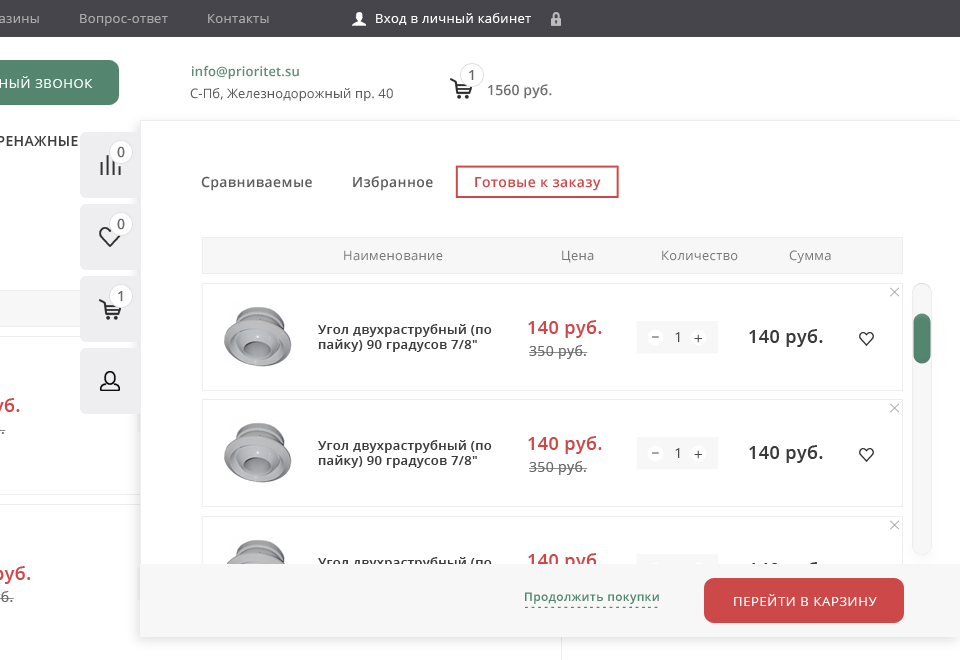
<style>
.page{position:relative;width:960px;height:660px;background:#ffffff}
.page>*{position:absolute;margin:0}
.t1{font:14px "OpenSans-Semibold";letter-spacing:0.025em;color:#676767;text-transform:uppercase}
.t2{font:14px "OpenSans-Semibold";letter-spacing:0.025em;color:#5c5c5c}
.t3{font:14px "OpenSans-Semibold";letter-spacing:0.025em;color:#cd4949}
.t4{font:13px "OpenSans";letter-spacing:0.025em;color:#787878}
.t5{font:13px "OpenSans-Semibold";letter-spacing:0.025em;color:#3a3a3a}
.t6{font:18px "OpenSans-Semibold";letter-spacing:0.025em;color:#cd4949}
.t7{font:18px "OpenSans-Semibold";letter-spacing:0.025em;color:#3a3a3a}
.t8{font:16px "SegoeUI"}
.t9{font:14px "SegoeUI";color:#4a4a4a}
.t10{font:16px "SegoeUI";color:#4a4a4a}
.t11{font:14px "OpenSans";letter-spacing:0.025em;color:#696969}
.t12{font:12px "OpenSans-Semibold";letter-spacing:0.025em;color:#54856f}
.t13{font:13px "OpenSans";letter-spacing:0.05em;color:#ffffff;text-transform:uppercase}
</style>
<div class="page">
<p class="t1" style="left:117px;top:146px;width:8px;height:12px">0</p>
<p class="t2" style="left:201px;top:176px;width:111px;height:15px">Сравниваемые</p>
<p class="t2" style="left:353px;top:176px;width:80px;height:15px">Избранное</p>
<p class="t3" style="left:475px;top:177px;width:126px;height:14px">Готовые к заказу</p>
<p class="t1" style="left:117px;top:218px;width:8px;height:12px">0</p>
<p class="t4" style="left:344px;top:250px;width:99px;height:11px">Наименование</p>
<p class="t4" style="left:562px;top:250px;width:32px;height:13px">Цена</p>
<p class="t4" style="left:662px;top:250px;width:76px;height:11px">Количество</p>
<p class="t4" style="left:789px;top:250px;width:42px;height:13px">Сумма</p>
<p class="t1" style="left:118px;top:291px;width:5px;height:10px">1</p>
<p class="t5" style="left:318px;top:324px;width:174px;height:28px">Угол двухраструбный (по пайку) 90 градусов 7/8"</p>
<p class="t6" style="left:528px;top:320px;width:74px;height:18px">140 руб.</p>
<p class="t7" style="left:749px;top:329px;width:74px;height:18px">140 руб.</p>
<p class="t8" style="left:652px;top:336px;width:7px;height:2px">_</p>
<p class="t9" style="left:675px;top:332px;width:5px;height:10px">1</p>
<p class="t10" style="left:694px;top:334px;width:8px;height:9px">+</p>
<p class="t11" style="left:529px;top:345px;width:59px;height:14px">350 руб.</p>
<p class="t6" style="left:528px;top:436px;width:74px;height:18px">140 руб.</p>
<p class="t5" style="left:318px;top:440px;width:174px;height:28px">Угол двухраструбный (по пайку) 90 градусов 7/8"</p>
<p class="t9" style="left:675px;top:448px;width:5px;height:10px">1</p>
<p class="t7" style="left:749px;top:445px;width:74px;height:18px">140 руб.</p>
<p class="t11" style="left:529px;top:461px;width:59px;height:14px">350 руб.</p>
<p class="t8" style="left:652px;top:452px;width:7px;height:2px">_</p>
<p class="t10" style="left:694px;top:450px;width:8px;height:9px">+</p>
<p class="t12" style="left:525px;top:592px;width:134px;height:12px">Продолжить покупки</p>
<p class="t13" style="left:734px;top:594px;width:143px;height:12px">перейти в карзину</p>
</div>
